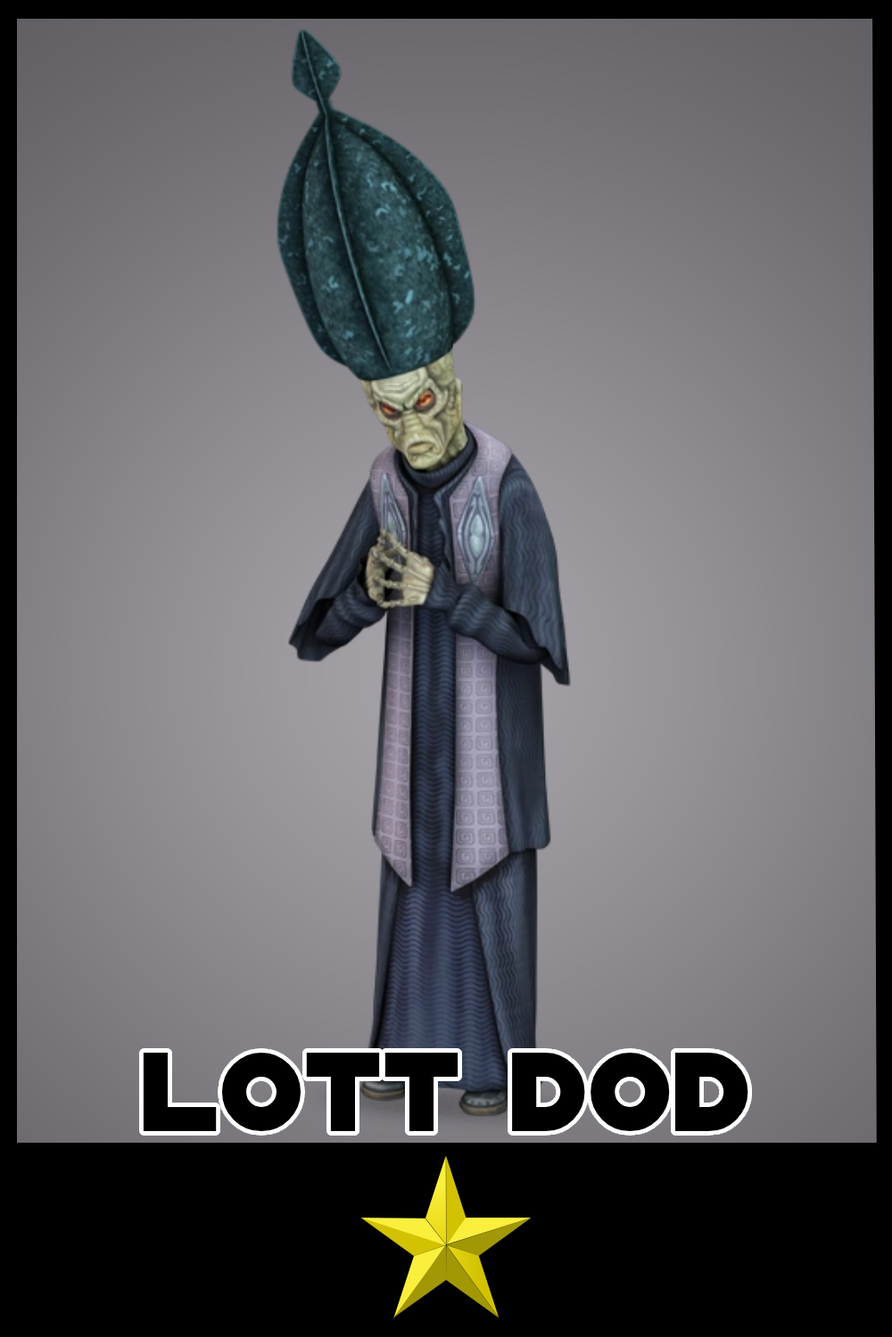
<style>
.page{position:relative;width:892px;height:1337px}
.page>*{position:absolute;margin:0}
.t1{font:120.8px "DistantGalaxy";color:#000000}
</style>
<div class="page">
<p class="t1" style="left:143px;top:1053px;width:605px;height:78px">lott dod</p>
</div>
